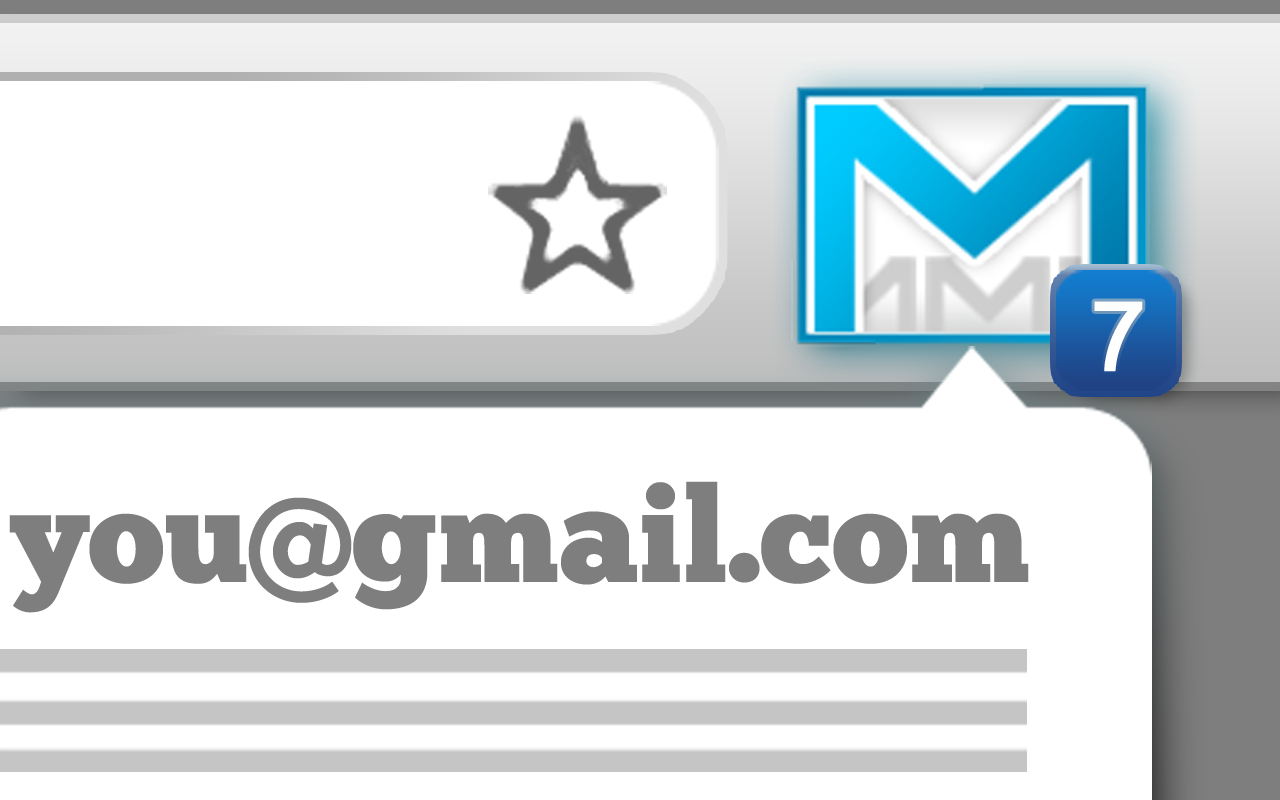
<style>
.page{position:relative;width:1280px;height:800px;background:#ffffff}
.page>*{position:absolute;margin:0}
.t1{font:97px "ArialMT";color:#fefefe;font-weight:bold}
.t2{font:133.4px "ChunkFive";color:#7f7e7e}
</style>
<div class="page">
<p class="t1" style="left:1094px;top:301px;width:49px;height:71px">7</p>
<p class="t2" style="left:9px;top:481px;width:1020px;height:132px">you@gmail.com</p>
</div>
